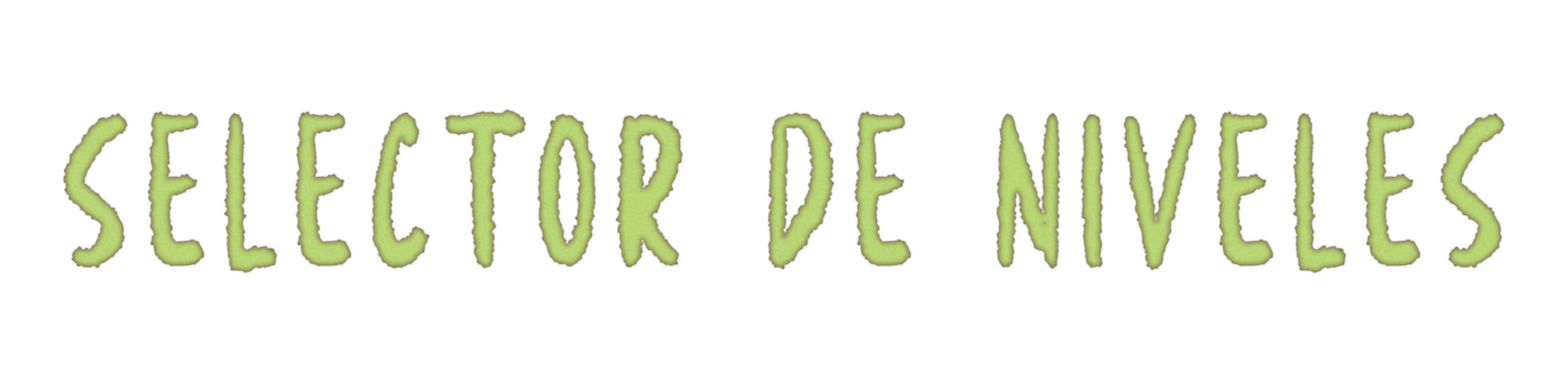
<style>
.page{position:relative;width:1568px;height:392px;background:#ffffff}
.page>*{position:absolute;margin:0}
.t1{font:163.3px "Metalien";letter-spacing:0.1em;color:#b7d974}
</style>
<div class="page">
<p class="t1" style="left:64px;top:110px;width:1440px;height:163px">Selector de niveles</p>
</div>
